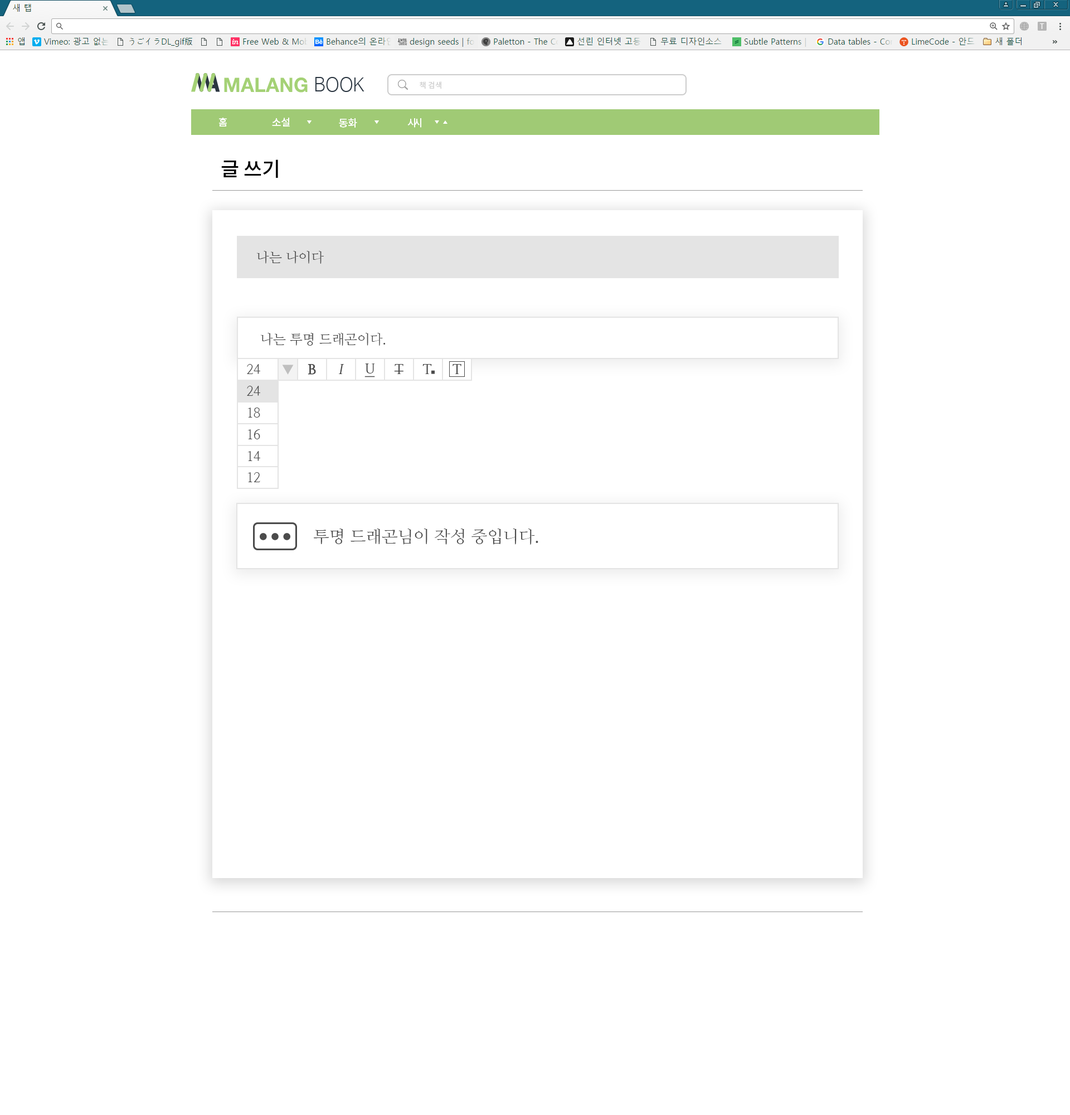
<style>
.page{position:relative;width:1070px;height:1115px;background:#ffffff}
.page>*{position:absolute;margin:0}
.t1{font:7.8px "NotoSansCJKkr-Medium";color:#d2d2d2}
.t2{font:10px "NotoSansCJKkr-Medium";color:#ffffff}
.t3{font:7.8px "NanumBarunGothicBold";color:#f3f3f3}
.t4{font:20.1px "NotoSansCJKkr-Medium";color:#000000}
.t5{font:13.4px "NanumMyeongjo";color:#4b4b4b}
.t6{font:13.4px "NanumMyeongjoBold";color:#4b4b4b;font-weight:bold}
.t7{font:13.4px "NanumMyeongjoBold";color:#4b4b4b;font-style:italic}
.t8{font:13.4px "NanumMyeongjoBold";color:#4b4b4b;text-decoration:underline}
.t9{font:13.4px "NanumMyeongjoBold";color:#4b4b4b}
.t10{font:16.7px "NanumMyeongjo";color:#4b4b4b}
</style>
<div class="page">
<p class="t1" style="left:420px;top:81px;width:21px;height:8px">책 검색</p>
<p class="t2" style="left:219px;top:118px;width:8px;height:8px">홈</p>
<p class="t2" style="left:219px;top:118px;width:8px;height:8px">홈</p>
<p class="t2" style="left:272px;top:118px;width:18px;height:8px">소설</p>
<p class="t2" style="left:272px;top:118px;width:18px;height:8px">소설</p>
<p class="t2" style="left:339px;top:118px;width:18px;height:10px">동화</p>
<p class="t2" style="left:339px;top:118px;width:18px;height:10px">동화</p>
<p class="t2" style="left:407px;top:118px;width:8px;height:10px"><span class="t3"> </span>시</p>
<p class="t2" style="left:413px;top:118px;width:8px;height:10px"><span class="t3"> </span>시</p>
<p class="t4" style="left:221px;top:159px;width:57px;height:19px">글 쓰기</p>
<p class="t5" style="left:257px;top:251px;width:67px;height:13px">나는 나이다</p>
<p class="t5" style="left:261px;top:333px;width:125px;height:12px">나는 투명 드래곤이다.</p>
<p class="t5" style="left:247px;top:364px;width:13px;height:10px">24</p>
<p class="t6" style="left:308px;top:364px;width:8px;height:10px">B</p>
<p class="t7" style="left:338px;top:364px;width:6px;height:10px">I</p>
<p class="t8" style="left:364px;top:363px;width:11px;height:14px">U</p>
<p class="t9" style="left:394px;top:364px;width:9px;height:10px">T</p>
<p class="t5" style="left:247px;top:386px;width:13px;height:10px">24</p>
<p class="t5" style="left:248px;top:407px;width:12px;height:10px">18</p>
<p class="t5" style="left:248px;top:429px;width:12px;height:10px">16</p>
<p class="t5" style="left:248px;top:451px;width:12px;height:10px">14</p>
<p class="t5" style="left:248px;top:472px;width:12px;height:10px">12</p>
<p class="t10" style="left:313px;top:528px;width:225px;height:16px">투명 드래곤님이 작성 중입니다.</p>
</div>
